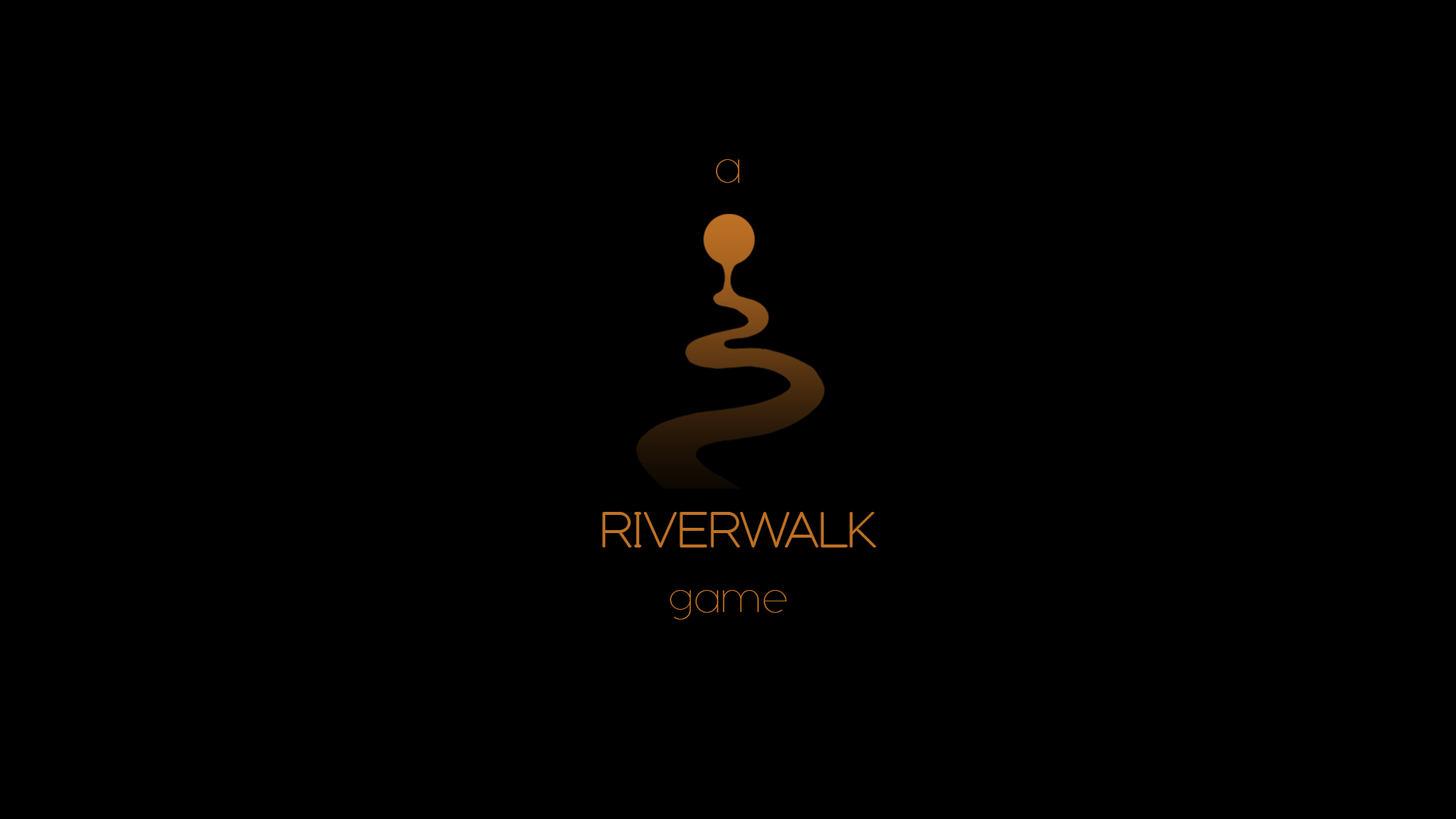
<style>
.page{position:relative;width:1456px;height:819px;background:#000000}
.page>*{position:absolute;margin:0}
.t1{font:35.2px "Adequate-ExtraLight";color:#be7125}
.t2{font:42.8px "Adequate-ExtraLight";color:#be7125}
.t3{font:34.4px "Adequate-ExtraLight";color:#be7125}
</style>
<div class="page">
<p class="t1" style="left:716px;top:159px;width:23px;height:24px">a</p>
<p class="t2" style="left:603px;top:513px;width:273px;height:34px">RIVERWALK</p>
<p class="t3" style="left:670px;top:590px;width:117px;height:30px">game</p>
</div>
